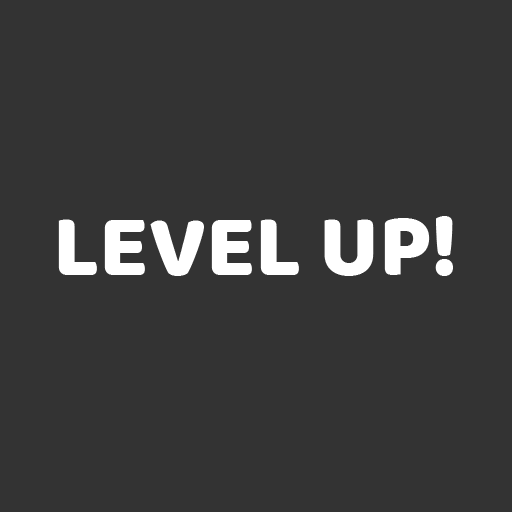
<style>
.page{position:relative;width:512px;height:512px;background:#333333}
.page>*{position:absolute;margin:0}
.t1{font:90px "BalooBhaina-Regular";color:#ffffff}
</style>
<div class="page">
<p class="t1" style="left:58px;top:216px;width:395px;height:60px">LEVEL UP!</p>
</div>
